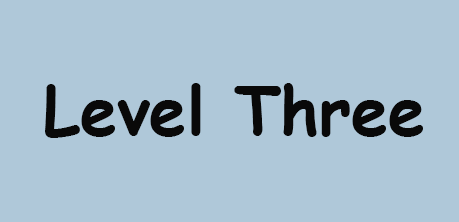
<style>
.page{position:relative;width:459px;height:222px;background:#afc8d9}
.page>*{position:absolute;margin:0}
.t1{font:66.7px "ComicSansMS-Bold";color:#090909}
</style>
<div class="page">
<p class="t1" style="left:45px;top:83px;width:378px;height:55px">Level Three</p>
</div>
